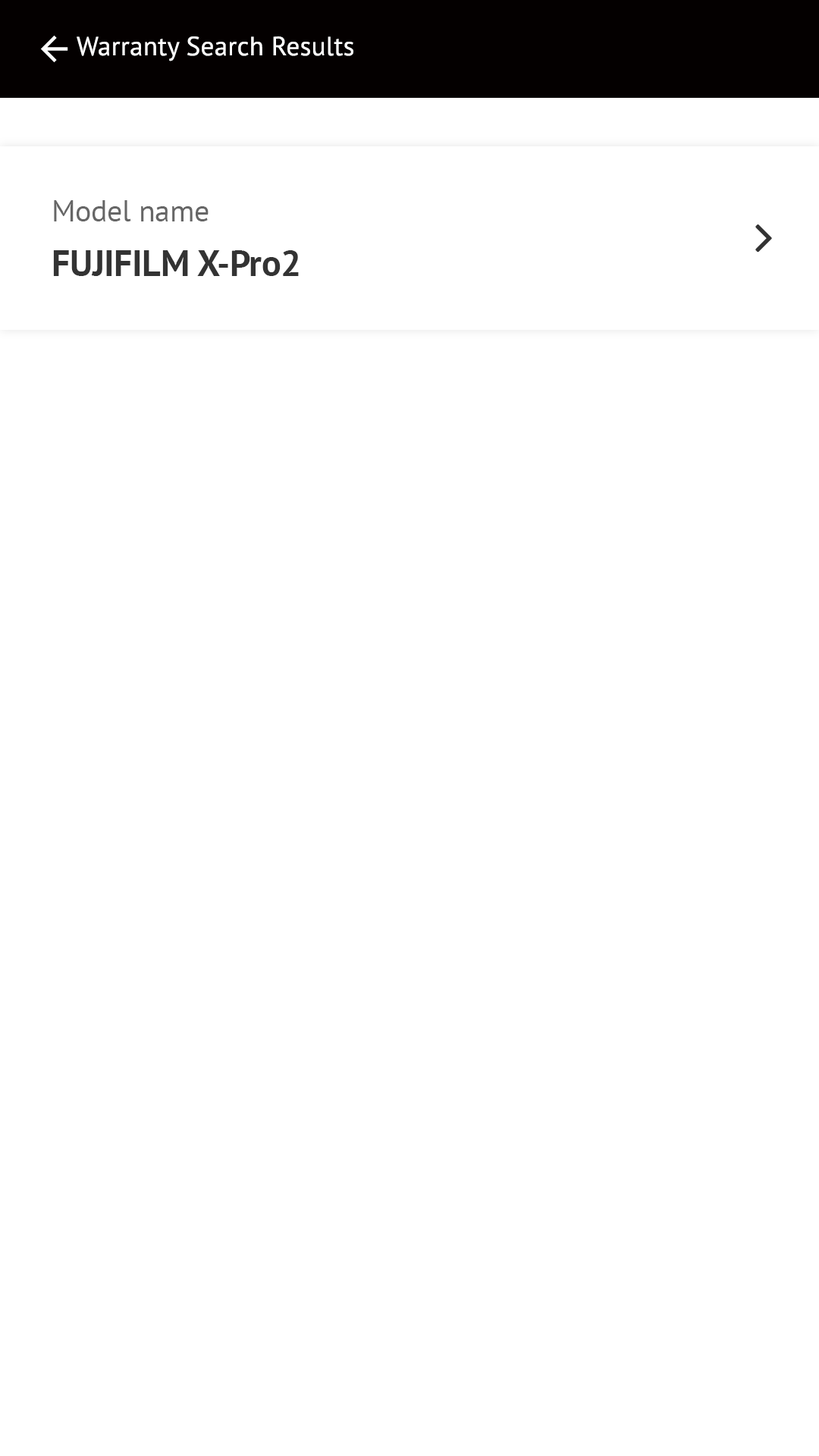
<style>
.page{position:relative;width:819px;height:1456px;background:#ffffff}
.page>*{position:absolute;margin:0}
.t1{font:26.5px "PTSans-Regular";letter-spacing:0.01em;color:#ffffff}
.t2{font:36.4px/54.6px "PTSans-Bold";letter-spacing:-0.01em;color:#333333}
.t3{font:30.3px/54.6px "PTSans-Regular";letter-spacing:-0.01em;color:#666666}
</style>
<div class="page">
<p class="t1" style="left:77px;top:36px;width:276px;height:25px">Warranty Search Results</p>
<p class="t2" style="left:53px;top:200px;width:246px;height:76px"><span class="t3">Model name<br></span>FUJIFILM X-Pro2</p>
</div>
